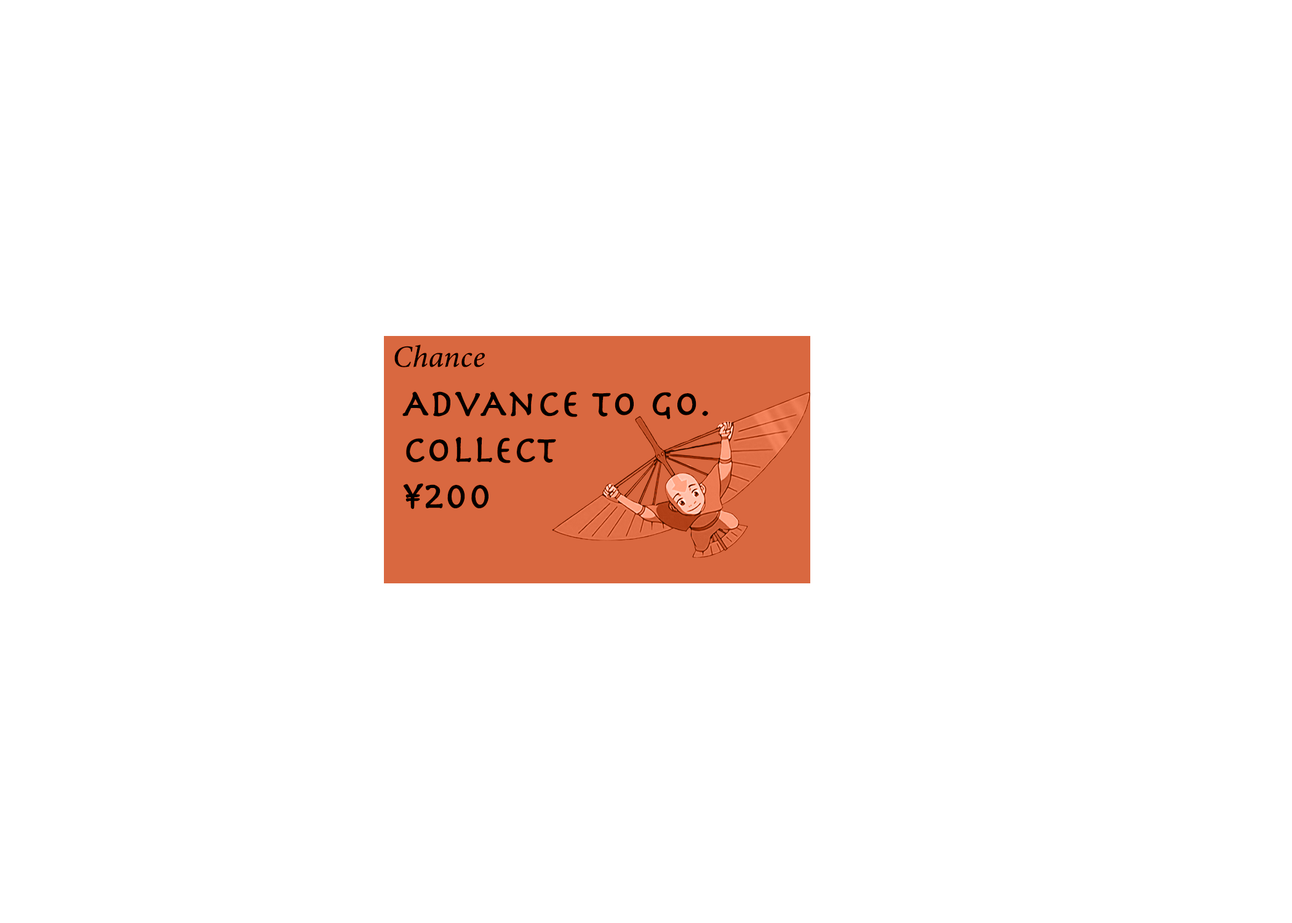
<style>
.page{position:relative;width:1292px;height:923px;background:#ffffff}
.page>*{position:absolute;margin:0}
.t1{font:30.8px "MinionConceptItalic-MediumItalic";color:#000000;font-weight:bold}
.t2{font:38.5px "Herculanum";color:#000000;font-weight:bold}
</style>
<div class="page">
<p class="t1" style="left:394px;top:345px;width:91px;height:22px">Chance</p>
<p class="t2" style="left:402px;top:391px;width:306px;height:118px">AdvAnce to go.<br>collect <br>¥200</p>
</div>
